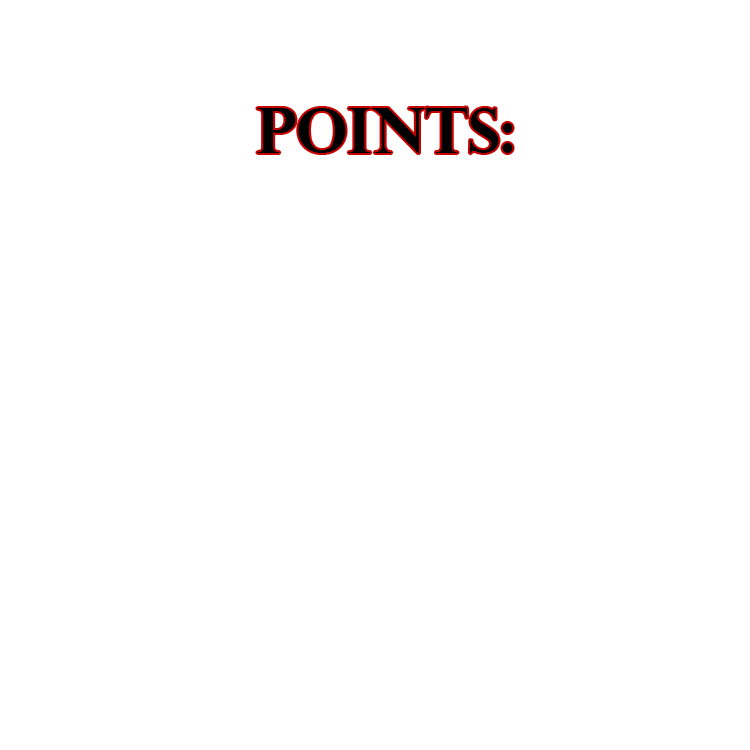
<style>
.page{position:relative;width:750px;height:750px;background:#ffffff}
.page>*{position:absolute;margin:0}
.t1{font:62.5px "PerpetuaTitlingMT-Bold";color:#000000}
</style>
<div class="page">
<p class="t1" style="left:257px;top:107px;width:256px;height:46px">POINTS:</p>
</div>
